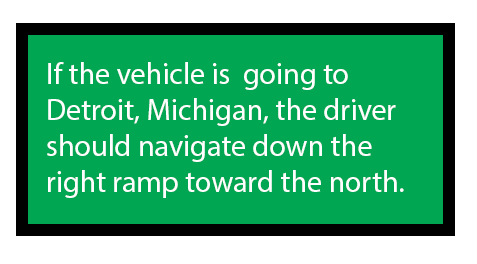
<style>
.page{position:relative;width:477px;height:264px;background:#00a651}
.page>*{position:absolute;margin:0}
.t1{font:30px "MyriadPro-Regular";color:#ffffff}
</style>
<div class="page">
<p class="t1" style="left:47px;top:62px;width:357px;height:136px">If the vehicle is  going to Detroit, Michigan, the driver should navigate down the right ramp toward the north.</p>
</div>
